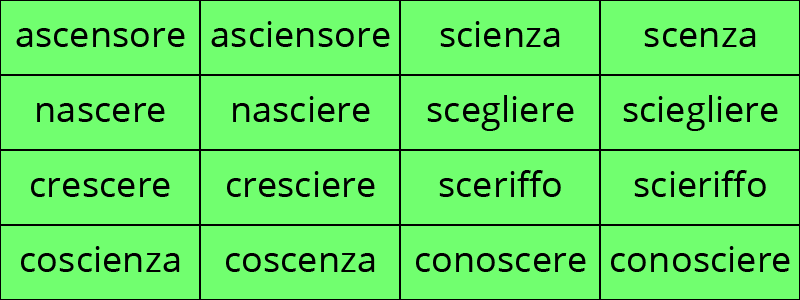
<style>
.page{position:relative;width:800px;height:300px;background:#71ff6f}
.page>*{position:absolute;margin:0}
.t1{font:36.3px "OpenSans";color:#000000}
</style>
<div class="page">
<p class="t1" style="left:16px;top:28px;width:169px;height:19px">ascensore</p>
<p class="t1" style="left:211px;top:21px;width:179px;height:26px">asciensore</p>
<p class="t1" style="left:440px;top:21px;width:120px;height:26px">scienza</p>
<p class="t1" style="left:644px;top:28px;width:112px;height:19px">scenza</p>
<p class="t1" style="left:233px;top:96px;width:137px;height:26px">nasciere</p>
<p class="t1" style="left:427px;top:95px;width:147px;height:36px">scegliere</p>
<p class="t1" style="left:623px;top:95px;width:155px;height:36px">sciegliere</p>
<p class="t1" style="left:37px;top:103px;width:128px;height:19px">nascere</p>
<p class="t1" style="left:227px;top:171px;width:148px;height:26px">cresciere</p>
<p class="t1" style="left:439px;top:170px;width:122px;height:27px">sceriffo</p>
<p class="t1" style="left:634px;top:170px;width:132px;height:27px">scieriffo</p>
<p class="t1" style="left:31px;top:178px;width:139px;height:19px">crescere</p>
<p class="t1" style="left:21px;top:246px;width:159px;height:26px">coscienza</p>
<p class="t1" style="left:611px;top:246px;width:179px;height:26px">conosciere</p>
<p class="t1" style="left:226px;top:253px;width:149px;height:19px">coscenza</p>
<p class="t1" style="left:416px;top:253px;width:170px;height:19px">conoscere</p>
</div>
